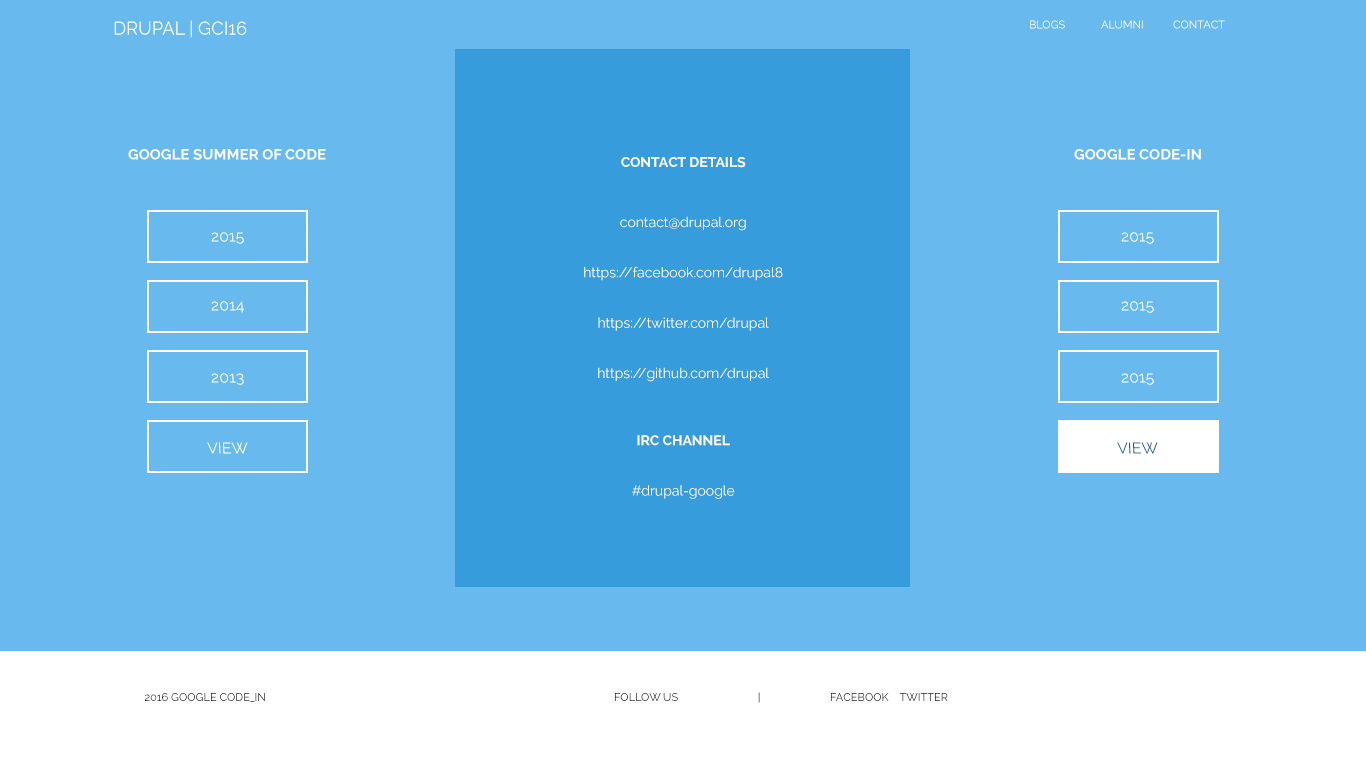
<style>
.page{position:relative;width:1366px;height:768px;background:#68baee}
.page>*{position:absolute;margin:0}
.t1{font:18.5px "Raleway-Regular";color:#ffffff}
.t2{font:11px "Raleway-Regular";color:#ffffff}
.t3{font:14.8px "Raleway-Bold";color:#ffffff}
.t4{font:14px "Raleway-Bold";color:#ffffff}
.t5{font:14px "Raleway-Regular";color:#ffffff}
.t6{font:15.5px "Raleway-Regular";color:#ffffff}
.t7{font:15.5px "Raleway-Regular";color:#156190}
.t8{font:11px "Raleway-Regular";color:#000000}
.t9{font:11px "Raleway-Regular"}
</style>
<div class="page">
<p class="t1" style="left:114px;top:20px;width:133px;height:18px">DRUPAL | GCI16</p>
<p class="t2" style="left:1030px;top:20px;width:195px;height:9px">BLOGS ALUMNI CONTACT</p>
<p class="t3" style="left:128px;top:149px;width:198px;height:11px">GOOGLE SUMMER OF CODE</p>
<p class="t3" style="left:1074px;top:149px;width:127px;height:11px">GOOGLE CODE-IN</p>
<p class="t4" style="left:621px;top:157px;width:125px;height:11px">CONTACT DETAILS</p>
<p class="t5" style="left:584px;top:216px;width:199px;height:283px;text-align:center">contact@drupal.org<br><br><br>https://facebook.com/drupal8<br><br><br>https://twitter.com/drupal<br><br><br>https://github.com/drupal<br><br><br><br><span class="t4">IRC CHANNEL<br></span><br><br>#drupal-google</p>
<p class="t6" style="left:211px;top:232px;width:33px;height:12px">2015</p>
<p class="t6" style="left:1121px;top:232px;width:33px;height:12px">2015</p>
<p class="t6" style="left:211px;top:301px;width:33px;height:12px">2014</p>
<p class="t6" style="left:1121px;top:301px;width:33px;height:12px">2015</p>
<p class="t6" style="left:211px;top:373px;width:33px;height:12px">2013</p>
<p class="t6" style="left:1121px;top:373px;width:33px;height:12px">2015</p>
<p class="t6" style="left:207px;top:442px;width:41px;height:12px">VIEW</p>
<p class="t7" style="left:1117px;top:442px;width:41px;height:12px">VIEW</p>
<p class="t8" style="left:145px;top:693px;width:120px;height:9px">2016 GOOGLE CODE_IN</p>
<p class="t9" style="left:615px;top:692px;width:333px;height:11px">FOLLOW US    |  FACEBOOK    TWITTER</p>
</div>
